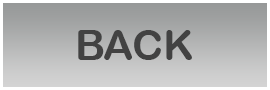
<style>
.page{position:relative;width:270px;height:90px}
.page>*{position:absolute;margin:0}
.t1{font:41.7px "ArialRoundedMTBold";color:#424242}
</style>
<div class="page">
<p class="t1" style="left:78px;top:30px;width:114px;height:30px">BACK</p>
</div>
